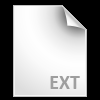
<style>
.page{position:relative;width:100px;height:100px;background:#000000}
.page>*{position:absolute;margin:0}
.t1{font:20px "Calibri-Bold";color:#9e9e9e}
</style>
<div class="page">
<p class="t1" style="left:50px;top:76px;width:30px;height:13px">EXT</p>
</div>
